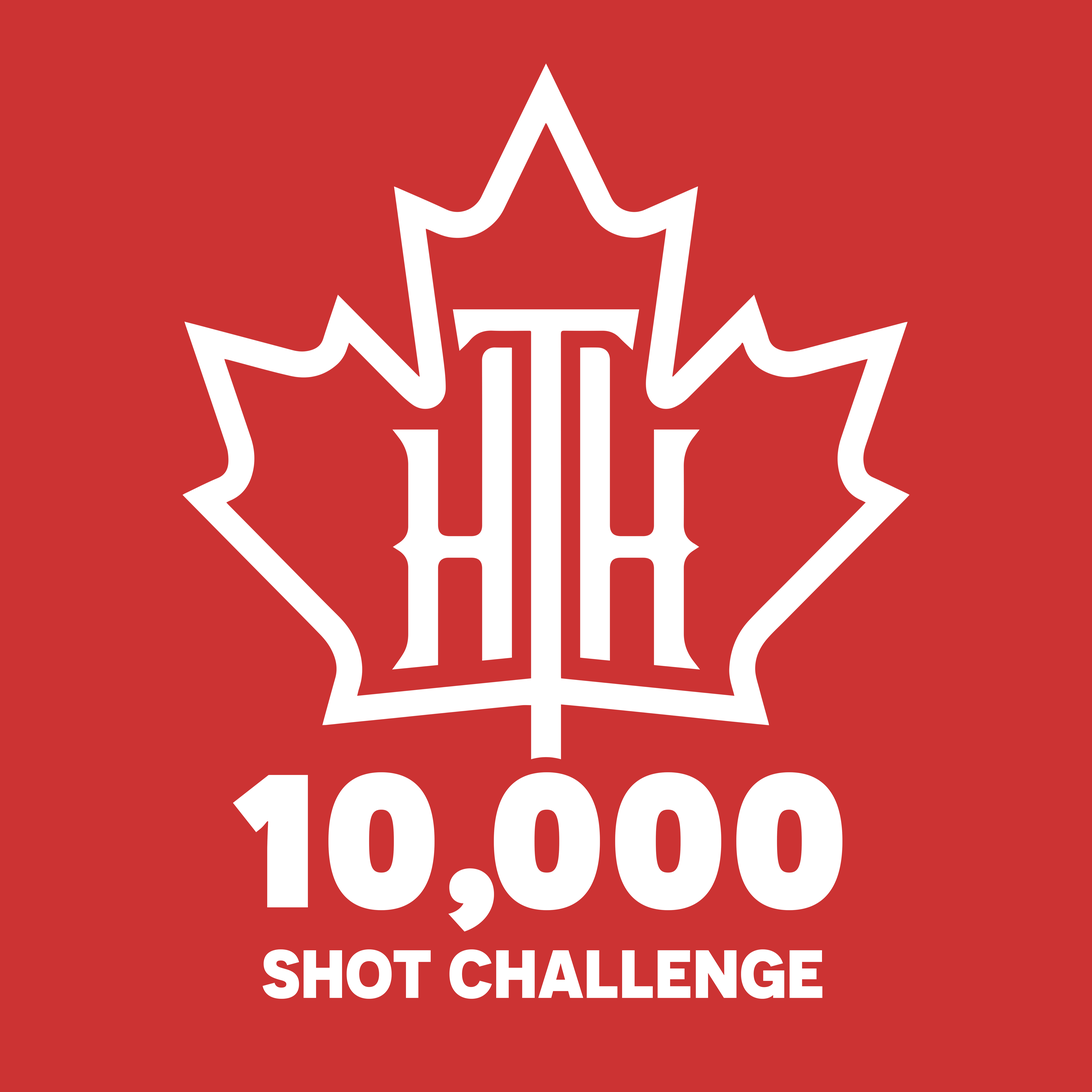
<style>
.page{position:relative;width:1092px;height:1092px;background:#cc3333}
.page>*{position:absolute;margin:0}
.t1{font:236.4px "Novecentosans-UltraBold";color:#ffffff}
.t2{font:236.4px "Novecentosans-UltraBold";letter-spacing:-0.06em;color:#ffffff}
.t3{font:68px "Novecentosans-UltraBold";color:#ffffff}
</style>
<div class="page">
<p class="t1" style="left:233px;top:772px;width:609px;height:160px">10<span class="t2">,</span>000</p>
<p class="t3" style="left:263px;top:949px;width:559px;height:50px">SHOT CHALLENGE</p>
</div>
